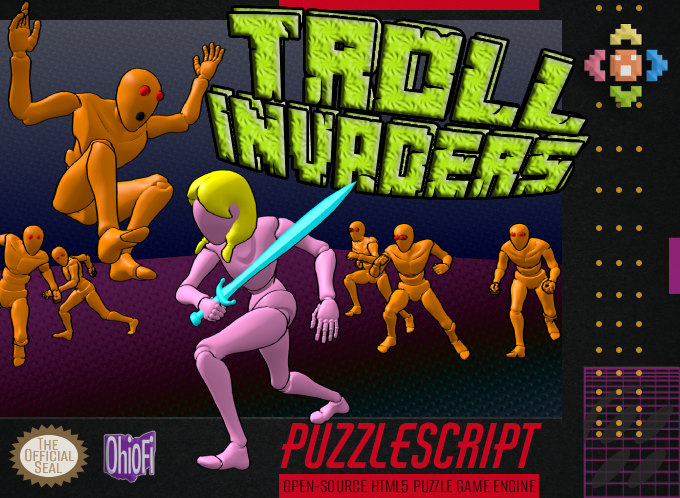
<style>
.page{position:relative;width:680px;height:498px}
.page>*{position:absolute;margin:0}
.t1{font:89px "MinecrafterAlt";scale:1.26 1}
.t2{font:109.3px "Molot";scale:1.26 1}
.t3{font:89.8px "Molot"}
.t4{font:72.5px "MinecrafterAlt"}
.t5{font:60px "AirAmerica-Regular";color:#c5061e}
.t6{font:20px "AlumniSansSC-Regular";color:#b39771}
.t7{font:20px "AlumniSansSC-Regular";color:#b29771}
.t8{font:20px "AlumniSansSC-Regular";color:#b39670}
.t9{font:20px "AlumniSansRoman-Regular";color:#310208}
</style>
<div class="page">
<p class="t1" style="left:228px;top:13px;width:358px;height:122px;rotate:9deg">Troll</p>
<p class="t2" style="left:233px;top:8px;width:347px;height:124px;rotate:9deg">Troll</p>
<p class="t3" style="left:212px;top:87px;width:377px;height:111px;rotate:7deg">INVADERS</p>
<p class="t4" style="left:206px;top:92px;width:378px;height:106px;rotate:7deg">INVADERS</p>
<p class="t5" style="left:280px;top:422px;width:262px;height:47px">Puzzlescript</p>
<p class="t6" style="left:37px;top:438px;width:21px;height:12px">The</p>
<p class="t7" style="left:25px;top:449px;width:49px;height:13px">Official</p>
<p class="t8" style="left:35px;top:461px;width:27px;height:13px">Seal</p>
<p class="t9" style="left:284px;top:480px;width:252px;height:13px">OPEN-SOURCE HTML5 PUZZLE GAME ENGINE</p>
</div>
